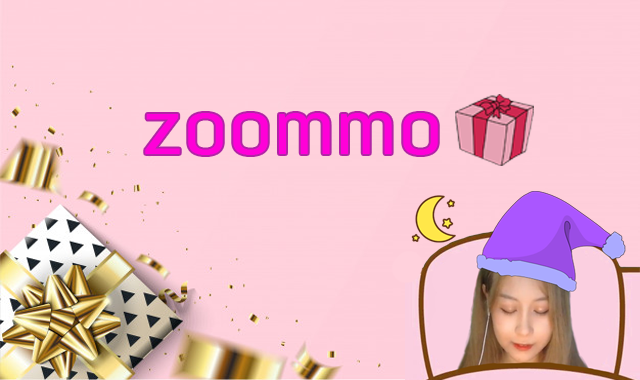
<style>
.page{position:relative;width:640px;height:380px;background:#ffd1dc}
.page>*{position:absolute;margin:0}
.t1{font:72px "Petchlamoon-Regular";color:#ff00d8}
</style>
<div class="page">
<p class="t1" style="left:145px;top:113px;width:293px;height:42px">zoommo</p>
</div>
